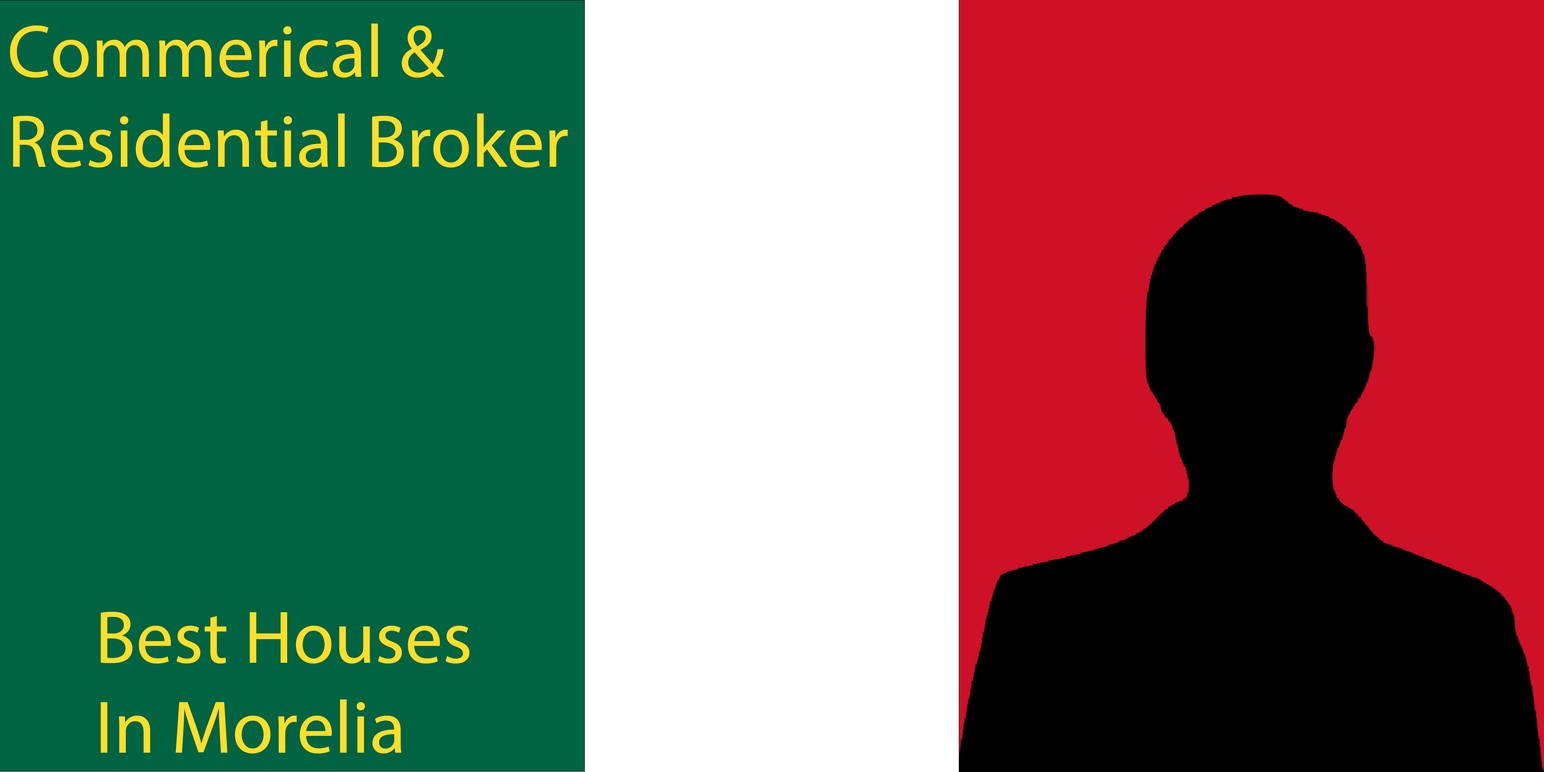
<style>
.page{position:relative;width:1544px;height:772px;background:#006341}
.page>*{position:absolute;margin:0}
.t1{font:74.9px "MyriadPro-Regular";color:#ffde2a}
</style>
<div class="page">
<p class="t1" style="left:10px;top:24px;width:558px;height:144px">Commerical &amp; Residential Broker</p>
<p class="t1" style="left:101px;top:612px;width:368px;height:142px">Best Houses In Morelia</p>
</div>
